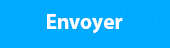
<style>
.page{position:relative;width:170px;height:48px;background:#00aaff}
.page>*{position:absolute;margin:0}
.t1{font:21.3px "MyriadPro-Bold";color:#ffffff}
</style>
<div class="page">
<p class="t1" style="left:47px;top:14px;width:76px;height:20px">Envoyer</p>
</div>
